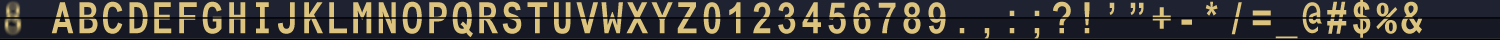
<style>
.page{position:relative;width:1500px;height:40px;background:#161823}
.page>*{position:absolute;margin:0}
.t1{font:43.2px "ArialMonospaced-Bold";letter-spacing:0.094em;color:#dcc47e;scale:0.83 1}
</style>
<div class="page">
<p class="t1" style="left:51px;top:0px;width:1372px;height:41px">ABCDEFGHIJKLMNOPQRSTUVWXYZ0123456789.,:;?!’”+-*/=_@#$%&amp;</p>
</div>
